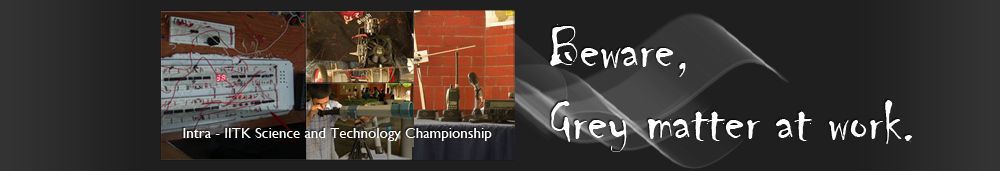
<style>
.page{position:relative;width:1000px;height:171px;background:#1f1f1f}
.page>*{position:absolute;margin:0}
.t1{font:60px "Chiller-Regular";color:#ffffff}
.t2{font:15px "GillSansMT";color:#ffffff}
</style>
<div class="page">
<p class="t1" style="left:550px;top:24px;width:362px;height:128px">Beware,<br>Grey matter at work.</p>
<p class="t2" style="left:183px;top:128px;width:309px;height:13px">Intra - IITK Science and Technology Championship</p>
</div>
